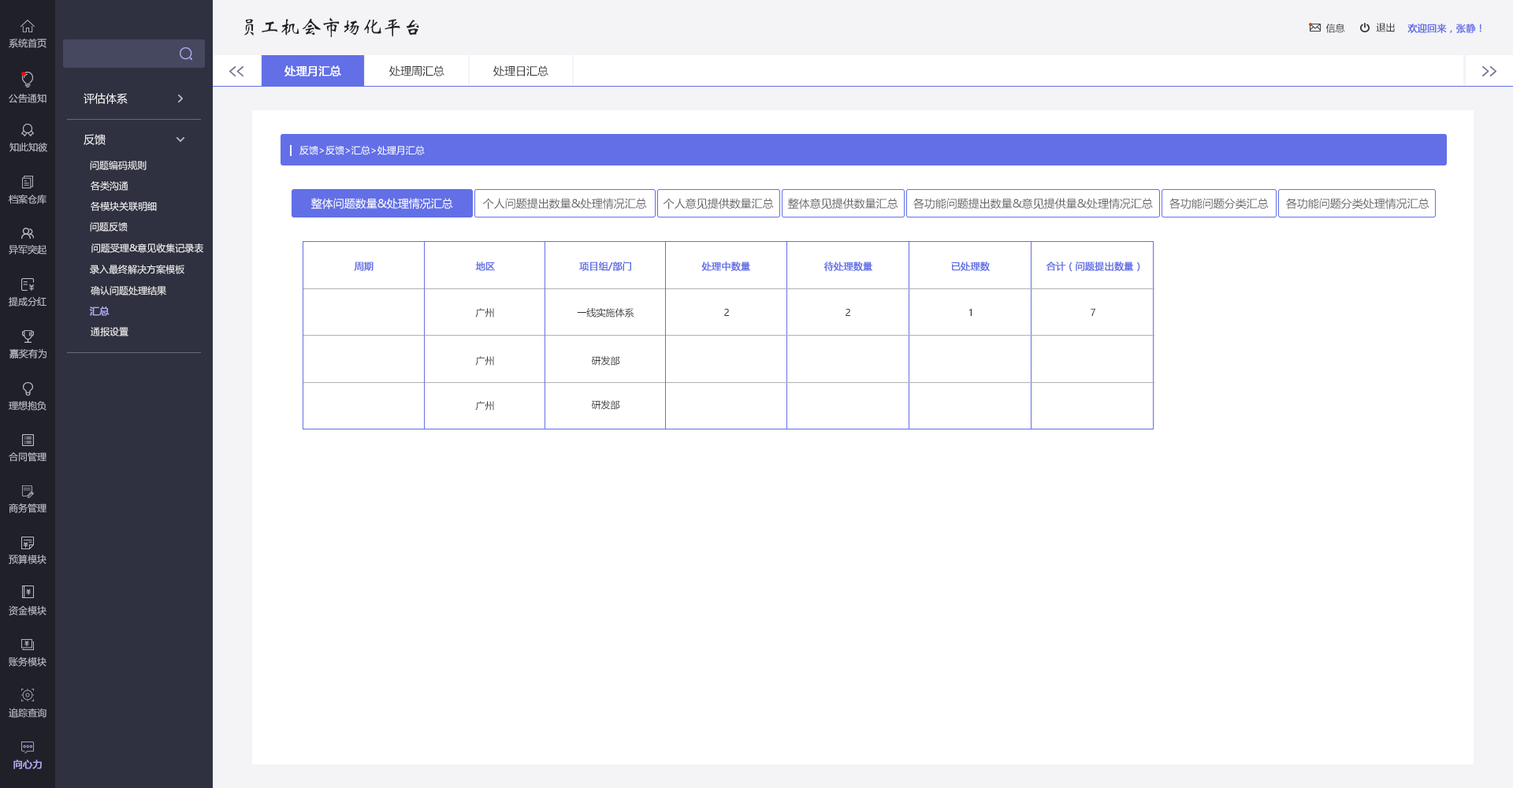
<style>
.page{position:relative;width:1513px;height:788px;background:#ffffff}
.page>*{position:absolute;margin:0}
.t1{font:20.5px "STXinwei";color:#202028}
.t2{font:9.5px "MicrosoftYaHei";color:#333333}
.t3{font:9.5px "MicrosoftYaHei";color:#636fe7;font-weight:bold}
.t4{font:9.5px "MicrosoftYaHei";color:#bfbec9}
.t5{font:11px "MicrosoftYaHei";color:#ffffff;font-weight:bold}
.t6{font:11px "MicrosoftYaHei";color:#333333}
.t7{font:11px "MicrosoftYaHei";color:#f4f4f6}
.t8{font:9.5px "MicrosoftYaHei";color:#ffffff}
.t9{font:9.5px "MicrosoftYaHei";color:#f4f4f6}
.t10{font:11px "MicrosoftYaHei";color:#ffffff}
.t11{font:11px "MicrosoftYaHei";color:#666666}
.t12{font:9.5px "MicrosoftYaHei";color:#626fe6;font-weight:bold}
.t13{font:9.5px "MicrosoftYaHei";color:#b3aef5;font-weight:bold}
</style>
<div class="page">
<p class="t1" style="left:244px;top:17px;width:175px;height:20px">员工机会市场化平台</p>
<p class="t2" style="left:1326px;top:24px;width:19px;height:9px">信息</p>
<p class="t2" style="left:1376px;top:23px;width:19px;height:9px">退出</p>
<p class="t3" style="left:1407px;top:24px;width:75px;height:9px">欢迎回来，张静！</p>
<p class="t4" style="left:9px;top:38px;width:37px;height:10px">系统首页</p>
<p class="t5" style="left:284px;top:65px;width:57px;height:11px">处理月汇总</p>
<p class="t6" style="left:389px;top:65px;width:55px;height:11px">处理周汇总</p>
<p class="t6" style="left:493px;top:65px;width:55px;height:11px">处理日汇总</p>
<p class="t4" style="left:9px;top:94px;width:37px;height:9px">公告通知</p>
<p class="t7" style="left:84px;top:93px;width:44px;height:11px">评估体系</p>
<p class="t7" style="left:84px;top:134px;width:22px;height:11px">反馈</p>
<p class="t4" style="left:9px;top:143px;width:38px;height:9px">知此知彼</p>
<p class="t8" style="left:299px;top:146px;width:126px;height:9px">反馈&gt;反馈&gt;汇总&gt;处理月汇总</p>
<p class="t9" style="left:90px;top:161px;width:57px;height:9px">问题编码规则</p>
<p class="t9" style="left:91px;top:181px;width:37px;height:10px">各类沟通</p>
<p class="t4" style="left:9px;top:194px;width:37px;height:10px">档案仓库</p>
<p class="t10" style="left:311px;top:198px;width:142px;height:12px">整体问题数量&amp;处理情况汇总</p>
<p class="t11" style="left:482px;top:198px;width:165px;height:12px">个人问题提出数量&amp;处理情况汇总</p>
<p class="t11" style="left:663px;top:198px;width:111px;height:12px">个人意见提供数量汇总</p>
<p class="t11" style="left:787px;top:198px;width:111px;height:12px">整体意见提供数量汇总</p>
<p class="t11" style="left:913px;top:198px;width:240px;height:12px">各功能问题提出数量&amp;意见提供量&amp;处理情况汇总</p>
<p class="t11" style="left:1169px;top:198px;width:100px;height:12px">各功能问题分类汇总</p>
<p class="t11" style="left:1286px;top:198px;width:144px;height:12px">各功能问题分类处理情况汇总</p>
<p class="t9" style="left:91px;top:202px;width:66px;height:9px">各模块关联明细</p>
<p class="t9" style="left:90px;top:222px;width:38px;height:10px">问题反馈</p>
<p class="t4" style="left:9px;top:244px;width:37px;height:11px">异军突起</p>
<p class="t9" style="left:91px;top:244px;width:112px;height:9px">问题受理&amp;意见收集记录表</p>
<p class="t9" style="left:90px;top:264px;width:94px;height:10px">录入最终解决方案模板</p>
<p class="t12" style="left:354px;top:262px;width:20px;height:9px">周期</p>
<p class="t12" style="left:475px;top:262px;width:20px;height:9px">地区</p>
<p class="t12" style="left:579px;top:262px;width:52px;height:9px">项目组/部门</p>
<p class="t12" style="left:701px;top:262px;width:49px;height:9px">处理中数量</p>
<p class="t12" style="left:824px;top:262px;width:48px;height:9px">待处理数量</p>
<p class="t12" style="left:951px;top:262px;width:39px;height:9px">已处理数</p>
<p class="t12" style="left:1046px;top:262px;width:94px;height:10px">合计（问题提出数量）</p>
<p class="t9" style="left:91px;top:286px;width:75px;height:10px">确认问题处理结果</p>
<p class="t4" style="left:9px;top:296px;width:37px;height:11px">提成分红</p>
<p class="t13" style="left:89px;top:307px;width:21px;height:9px">汇总</p>
<p class="t2" style="left:475px;top:308px;width:19px;height:10px">广州</p>
<p class="t2" style="left:577px;top:307px;width:57px;height:11px">一线实施体系</p>
<p class="t2" style="left:724px;top:308px;width:5px;height:8px">2</p>
<p class="t2" style="left:846px;top:308px;width:4px;height:8px">2</p>
<p class="t2" style="left:969px;top:308px;width:3px;height:8px">1</p>
<p class="t2" style="left:1091px;top:308px;width:4px;height:8px">7</p>
<p class="t9" style="left:91px;top:327px;width:37px;height:10px">通报设置</p>
<p class="t4" style="left:9px;top:349px;width:37px;height:10px">嘉奖有为</p>
<p class="t2" style="left:475px;top:356px;width:19px;height:10px">广州</p>
<p class="t2" style="left:591px;top:356px;width:29px;height:10px">研发部</p>
<p class="t4" style="left:9px;top:401px;width:37px;height:10px">理想抱负</p>
<p class="t2" style="left:475px;top:401px;width:19px;height:10px">广州</p>
<p class="t2" style="left:591px;top:400px;width:29px;height:10px">研发部</p>
<p class="t4" style="left:9px;top:452px;width:37px;height:10px">合同管理</p>
<p class="t4" style="left:9px;top:503px;width:37px;height:10px">商务管理</p>
<p class="t4" style="left:9px;top:555px;width:37px;height:9px">预算模块</p>
<p class="t4" style="left:9px;top:605px;width:37px;height:10px">资金模块</p>
<p class="t4" style="left:9px;top:656px;width:37px;height:11px">账务模块</p>
<p class="t4" style="left:9px;top:708px;width:37px;height:10px">追踪查询</p>
<p class="t13" style="left:13px;top:760px;width:29px;height:9px">向心力</p>
</div>
